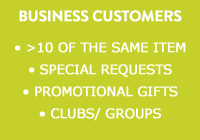
<style>
.page{position:relative;width:200px;height:140px;background:#c6d02a}
.page>*{position:absolute;margin:0}
.t1{font:15px "BrandonGrotesque-Bold";letter-spacing:-0.02em;color:#ffffff;font-weight:bold}
.t2{font:13px/22px "Verdana";letter-spacing:-0.02em;color:#ffffff;font-weight:bold}
</style>
<div class="page">
<p class="t1" style="left:19px;top:10px;width:163px;height:12px">BUSINESS CUSTOMERS</p>
<p class="t2" style="left:15px;top:42px;width:171px;height:79px;text-align:center">• &gt;10 OF THE SAME ITEM<br>• SPECIAL REQUESTS<br>• PROMOTIONAL GIFTS<br>• CLUBS/ GROUPS</p>
</div>
